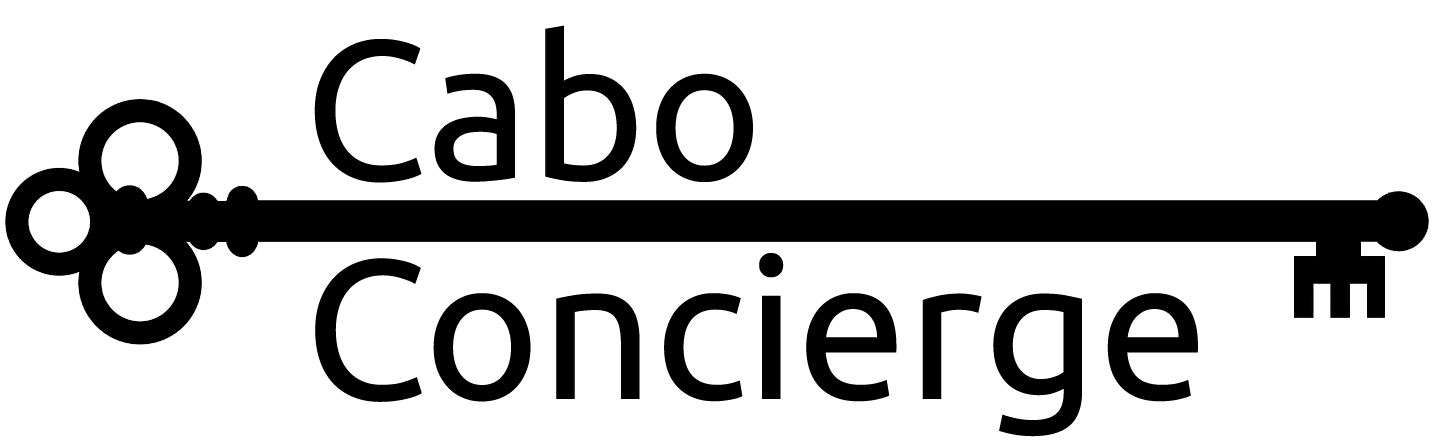
<style>
.page{position:relative;width:1434px;height:440px;background:#ffffff}
.page>*{position:absolute;margin:0}
.t1{font:198px "Ubuntu";color:#000000}
</style>
<div class="page">
<p class="t1" style="left:314px;top:25px;width:439px;height:158px">Cabo</p>
<p class="t1" style="left:315px;top:253px;width:883px;height:184px">Concierge</p>
</div>
